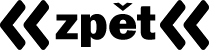
<style>
.page{position:relative;width:214px;height:50px;background:#ffffff}
.page>*{position:absolute;margin:0}
.t1{font:50px "FranklinGothic-Heavy";color:#000000}
</style>
<div class="page">
<p class="t1" style="left:55px;top:2px;width:101px;height:45px">zpět</p>
</div>
